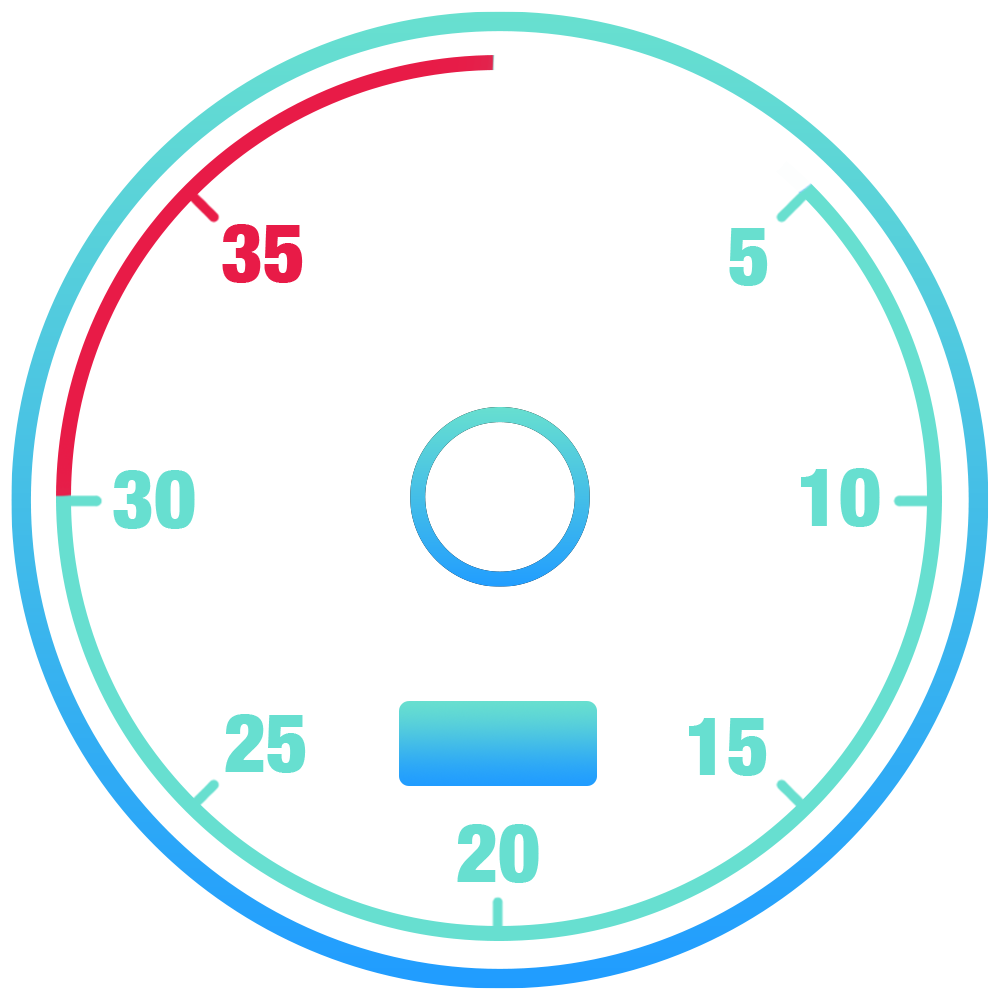
<style>
.page{position:relative;width:1000px;height:1000px;background:#ffffff}
.page>*{position:absolute;margin:0}
.t1{font:81.2px "HelveticaNeue-CondensedBlack";color:#e81b47}
.t2{font:81.2px "HelveticaNeue-CondensedBlack";color:#68dfcf}
.t3{font:81.2px "HelveticaNeue-CondensedBlack";color:#67dfd0}
</style>
<div class="page">
<p class="t1" style="left:222px;top:224px;width:81px;height:59px">35</p>
<p class="t2" style="left:729px;top:228px;width:39px;height:58px">5</p>
<p class="t3" style="left:113px;top:470px;width:82px;height:59px">30</p>
<p class="t3" style="left:801px;top:468px;width:79px;height:59px">10</p>
<p class="t3" style="left:225px;top:714px;width:81px;height:59px">25</p>
<p class="t3" style="left:689px;top:718px;width:78px;height:58px">15</p>
<p class="t3" style="left:457px;top:824px;width:82px;height:59px">20</p>
</div>
